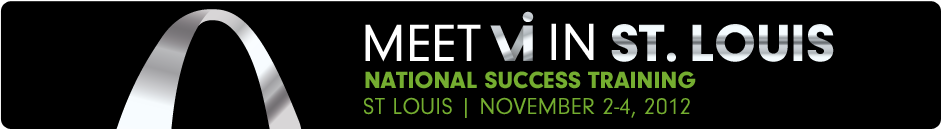
<style>
.page{position:relative;width:941px;height:130px;background:#000000}
.page>*{position:absolute;margin:0}
.t1{font:54.2px "NeuzeitGro-Reg";color:#ffffff;text-transform:uppercase}
.t2{font:54.2px "NeuzeitGro-Bla";text-transform:uppercase}
.t3{font:24.2px "NeuzeitGro-Bla";color:#74ad30;text-transform:uppercase}
.t4{font:23.9px "NeuzeitGro-Reg";color:#74ad30;text-transform:uppercase}
</style>
<div class="page">
<p class="t1" style="left:365px;top:24px;width:116px;height:38px">Meet</p>
<p class="t1" style="left:551px;top:23px;width:43px;height:37px">IN</p>
<p class="t2" style="left:611px;top:24px;width:223px;height:38px">ST. LOUIS</p>
<p class="t3" style="left:365px;top:71px;width:331px;height:18px">NATIONAL SUCCESS TRAINING</p>
<p class="t4" style="left:364px;top:97px;width:326px;height:21px">st louis | november 2-4, 2012</p>
</div>
